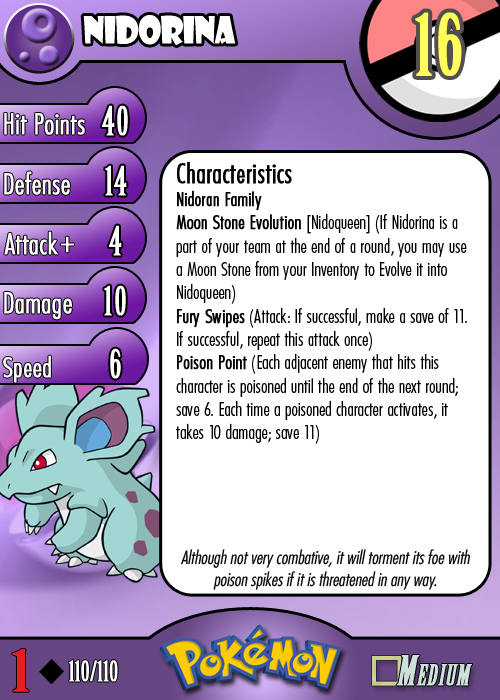
<style>
.page{position:relative;width:500px;height:700px;background:#ffffff}
.page>*{position:absolute;margin:0}
.t1{font:36.7px "ShowcardGothic-Reg";letter-spacing:-0.025em;color:#ffffff;scale:0.91 1}
.t2{font:83.3px "BirchStd";letter-spacing:0.025em;color:#fffd59;font-weight:bold}
.t3{font:27.8px "Futura-CondensedLight";color:#ffffff;font-weight:bold}
.t4{font:38.9px "BirchStd";letter-spacing:0.035em;color:#ffffff;font-weight:bold}
.t5{font:19.4px "FuturaCondensedBQ-Light";color:#010101}
.t6{font:27.8px "FuturaCondensedBQ-Light";color:#010101;font-weight:bold}
.t7{font:19.4px "FuturaCondensedBQ-Light";color:#010101;font-weight:bold}
.t8{font:30.6px "Futura-CondensedLight";color:#ffffff;font-weight:bold}
.t9{font:27.8px "FuturaCondensedBQ-Light";color:#ffffff;font-weight:bold}
.t10{font:18.1px "Futura-CondensedLight";color:#010101;font-style:italic}
.t11{font:55.6px "BirchStd";color:#ed1c24;font-weight:bold;scale:1.5 1}
.t12{font:27.8px "BirchStd";color:#ffffff;font-weight:bold}
</style>
<div class="page">
<p class="t1" style="left:83px;top:15px;width:153px;height:31px">nidorina</p>
<p class="t2" style="left:415px;top:12px;width:47px;height:64px">16</p>
<p class="t3" style="left:4px;top:113px;width:81px;height:22px">Hit Points</p>
<p class="t4" style="left:102px;top:105px;width:26px;height:31px">40</p>
<p class="t3" style="left:4px;top:171px;width:66px;height:24px">Defense</p>
<p class="t4" style="left:105px;top:165px;width:22px;height:31px">14</p>
<p class="t5" style="left:176px;top:162px;width:291px;height:282px"><span class="t6">Characteristics<br></span><span class="t7">Nidoran Family<br>Moon Stone Evolution </span>[Nidoqueen] (If Nidorina is a part of your team at the end of a round, you may use a Moon Stone from your Inventory to Evolve it into Nidoqueen)<br><span class="t7">Fury Swipes</span> (Attack: If successful, make a save of 11. If successful, repeat this attack once)<br><span class="t7">Poison Point</span> (Each adjacent enemy that hits this character is poisoned until the end of the next round; save 6. Each time a poisoned character activates, it takes 10 damage; save 11)</p>
<p class="t3" style="left:4px;top:231px;width:54px;height:24px">Attack</p>
<p class="t4" style="left:109px;top:225px;width:13px;height:31px">4</p>
<p class="t8" style="left:60px;top:236px;width:14px;height:17px">+</p>
<p class="t3" style="left:4px;top:292px;width:68px;height:28px">Damage</p>
<p class="t4" style="left:104px;top:285px;width:22px;height:31px">10</p>
<p class="t4" style="left:110px;top:348px;width:11px;height:31px">6</p>
<p class="t9" style="left:3px;top:355px;width:48px;height:28px">Speed</p>
<p class="t10" style="left:181px;top:549px;width:290px;height:41px;text-align:center">Although not very combative, it will torment its foe with poison spikes if it is threatened in any way.</p>
<p class="t11" style="left:12px;top:649px;width:17px;height:43px">1</p>
<p class="t12" style="left:68px;top:660px;width:50px;height:22px">110/110</p>
</div>
